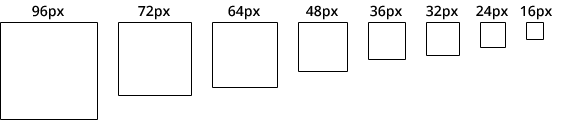
<style>
.page{position:relative;width:565px;height:120px;background:#ffffff}
.page>*{position:absolute;margin:0}
.t1{font:14px "OpenSans-Semibold";color:#000000}
</style>
<div class="page">
<p class="t1" style="left:32px;top:5px;width:32px;height:15px">96px</p>
<p class="t1" style="left:138px;top:5px;width:32px;height:15px">72px</p>
<p class="t1" style="left:228px;top:5px;width:32px;height:15px">64px</p>
<p class="t1" style="left:306px;top:5px;width:32px;height:15px">48px</p>
<p class="t1" style="left:370px;top:5px;width:32px;height:15px">36px</p>
<p class="t1" style="left:426px;top:5px;width:32px;height:15px">32px</p>
<p class="t1" style="left:476px;top:5px;width:32px;height:15px">24px</p>
<p class="t1" style="left:520px;top:5px;width:32px;height:15px">16px</p>
</div>
